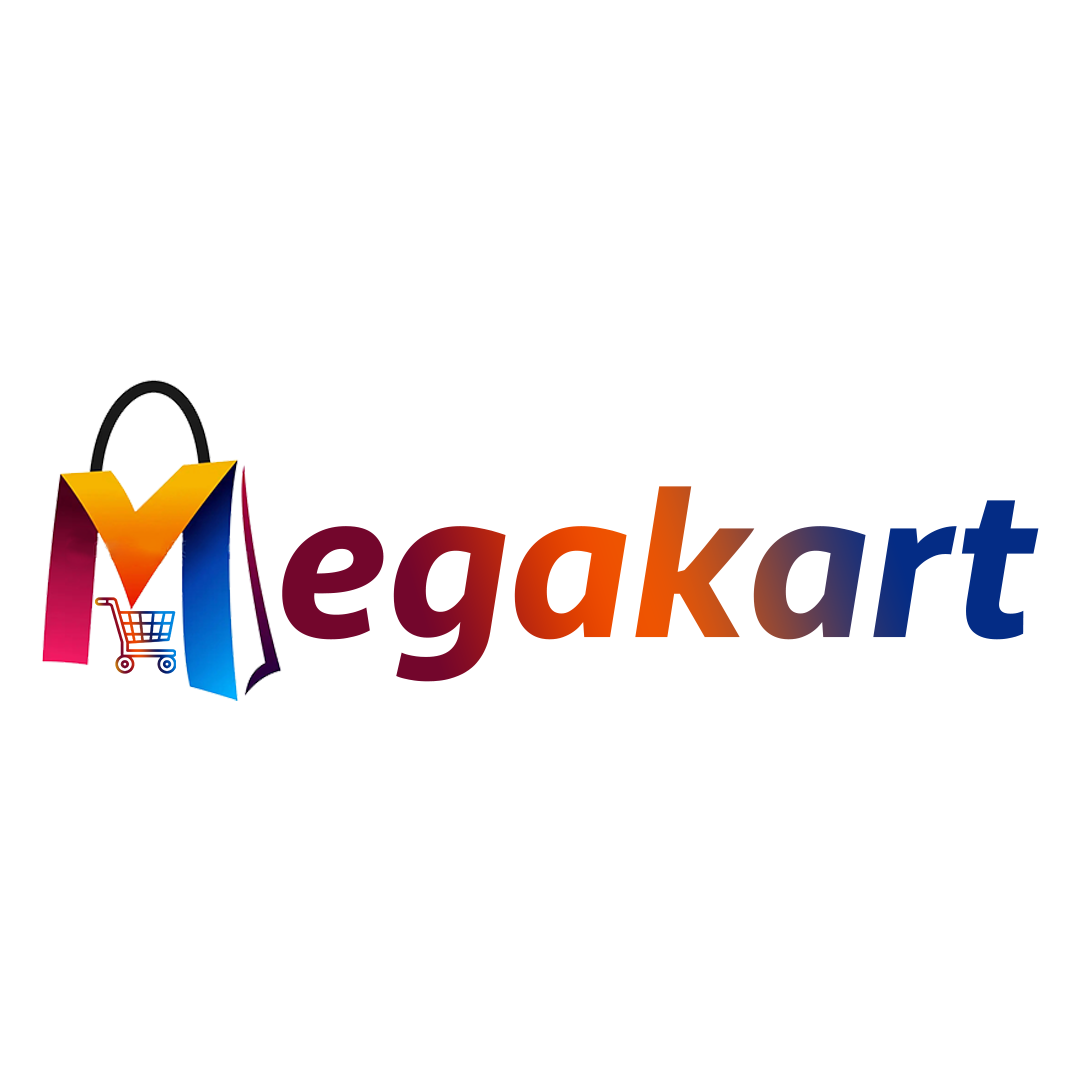
<style>
.page{position:relative;width:1080px;height:1080px;background:#ffffff}
.page>*{position:absolute;margin:0}
.t1{font:205.8px "RionaSansW04-BoldItalic"}
</style>
<div class="page">
<p class="t1" style="left:282px;top:486px;width:757px;height:196px">egakart</p>
</div>
